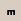
<style>
.page{position:relative;width:21px;height:21px;background:#d9cdc1}
.page>*{position:absolute;margin:0}
.t1{font:9px "Tahoma-Bold";color:#000000}
</style>
<div class="page">
<p class="t1" style="left:7px;top:10px;width:8px;height:5px">m</p>
</div>
